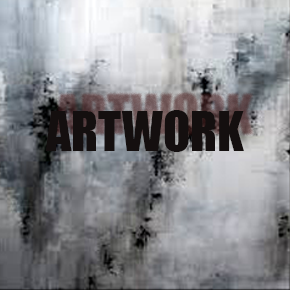
<style>
.page{position:relative;width:290px;height:290px}
.page>*{position:absolute;margin:0}
.t1{font:50px "Impact";color:#140f0f}
</style>
<div class="page">
<p class="t1" style="left:45px;top:110px;width:199px;height:42px">ARTWORK</p>
</div>
